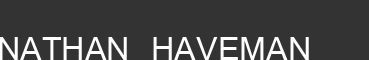
<style>
.page{position:relative;width:369px;height:60px;background:#333333}
.page>*{position:absolute;margin:0}
.t1{font:36px "Vrinda";color:#ffffff}
</style>
<div class="page">
<p class="t1" style="left:0px;top:37px;width:309px;height:23px">NATHAN HAVEMAN</p>
</div>
